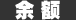
<style>
.page{position:relative;width:76px;height:20px;background:#333333}
.page>*{position:absolute;margin:0}
.t1{font:20px "HeitiEG-Ultra-GB";letter-spacing:0.3em;color:#ffffff}
</style>
<div class="page">
<p class="t1" style="left:15px;top:0px;width:45px;height:20px">余额</p>
</div>
